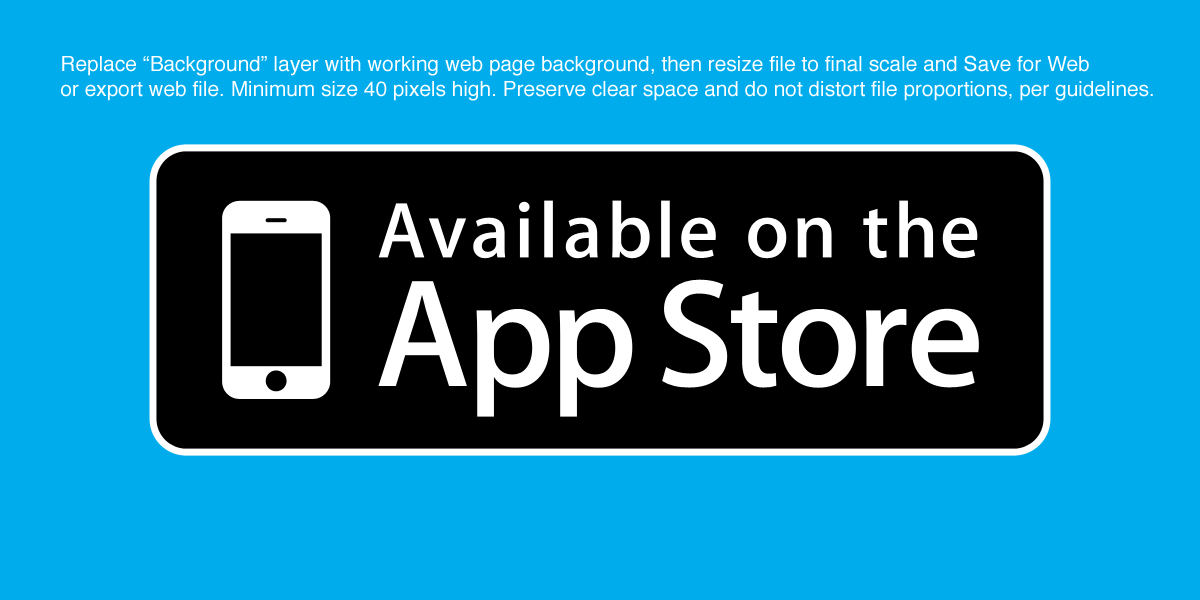
<style>
.page{position:relative;width:1200px;height:600px;background:#00acec}
.page>*{position:absolute;margin:0}
.t1{font:20.8px "Helvetica";color:#ffffff}
</style>
<div class="page">
<p class="t1" style="left:61px;top:55px;width:1092px;height:46px">Replace “Background” layer with working web page background, then resize file to final scale and Save for Web<br>or export web file. Minimum size 40 pixels high. Preserve clear space and do not distort file proportions, per guidelines.</p>
</div>
